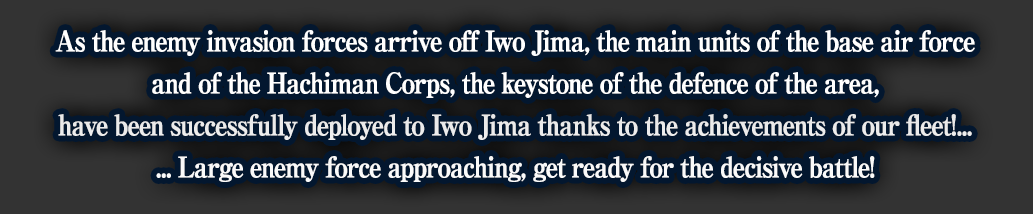
<style>
.page{position:relative;width:1033px;height:214px;background:#03172f}
.page>*{position:absolute;margin:0}
.t1{font:28px/42px "RyuminPro-ExBold";letter-spacing:-0.08em;color:#ffffff;font-weight:bold;scale:0.9 1}
</style>
<div class="page">
<p class="t1" style="left:55px;top:30px;width:920px;height:152px;text-align:center">As the enemy invasion forces arrive off Iwo Jima, the main units of the base air force<br>and of the Hachiman Corps, the keystone of the defence of the area,<br>have been successfully deployed to Iwo Jima thanks to the achievements of our fleet!...<br>... Large enemy force approaching, get ready for the decisive battle!</p>
</div>
